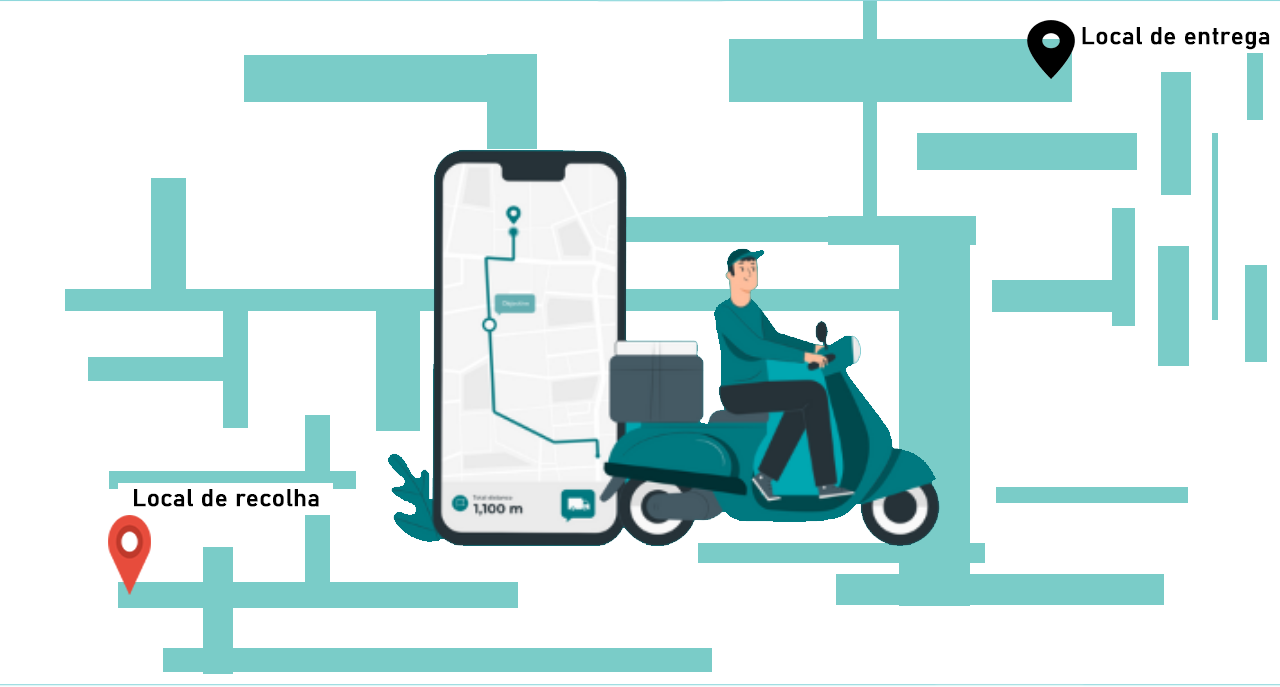
<style>
.page{position:relative;width:1280px;height:687px;background:#ffffff}
.page>*{position:absolute;margin:0}
.t1{font:24px "Bahnschrift";color:#000000;font-weight:bold}
</style>
<div class="page">
<p class="t1" style="left:1082px;top:27px;width:188px;height:23px">Local de entrega</p>
<p class="t1" style="left:134px;top:489px;width:185px;height:18px">Local de recolha</p>
</div>
